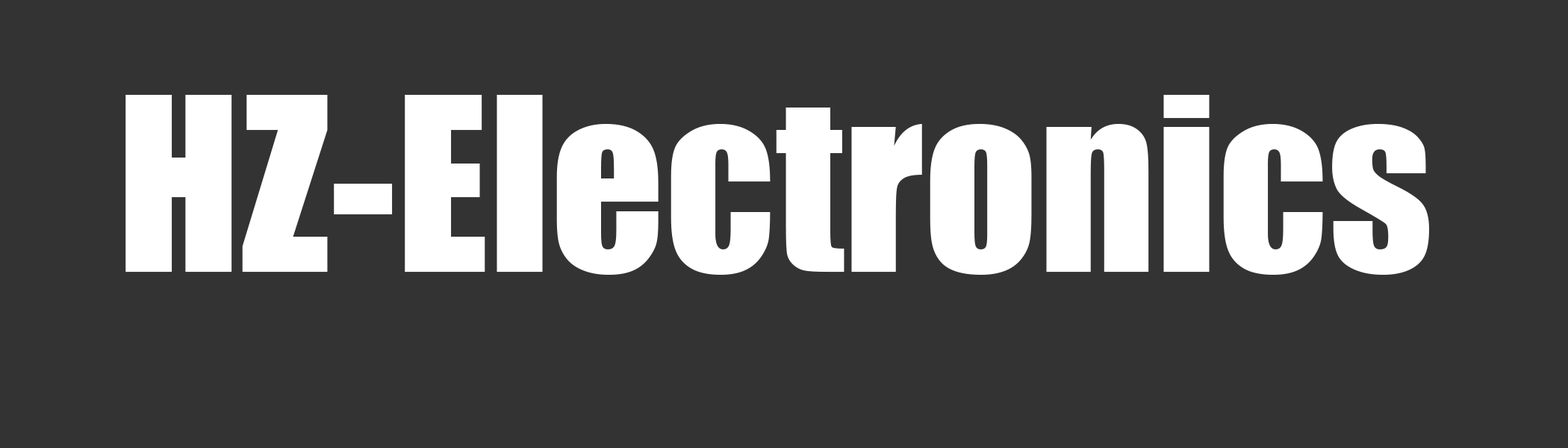
<style>
.page{position:relative;width:1568px;height:448px;background:#333333}
.page>*{position:absolute;margin:0}
.t1{font:224px "Impact";color:#ffffff}
</style>
<div class="page">
<p class="t1" style="left:125px;top:95px;width:1304px;height:180px">HZ-Electronics</p>
</div>
